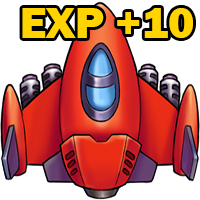
<style>
.page{position:relative;width:200px;height:200px;background:#ffffff}
.page>*{position:absolute;margin:0}
.t1{font:45px "FranklinGothic-Heavy";color:#ffd400}
</style>
<div class="page">
<p class="t1" style="left:22px;top:8px;width:171px;height:30px">EXP +10</p>
</div>
